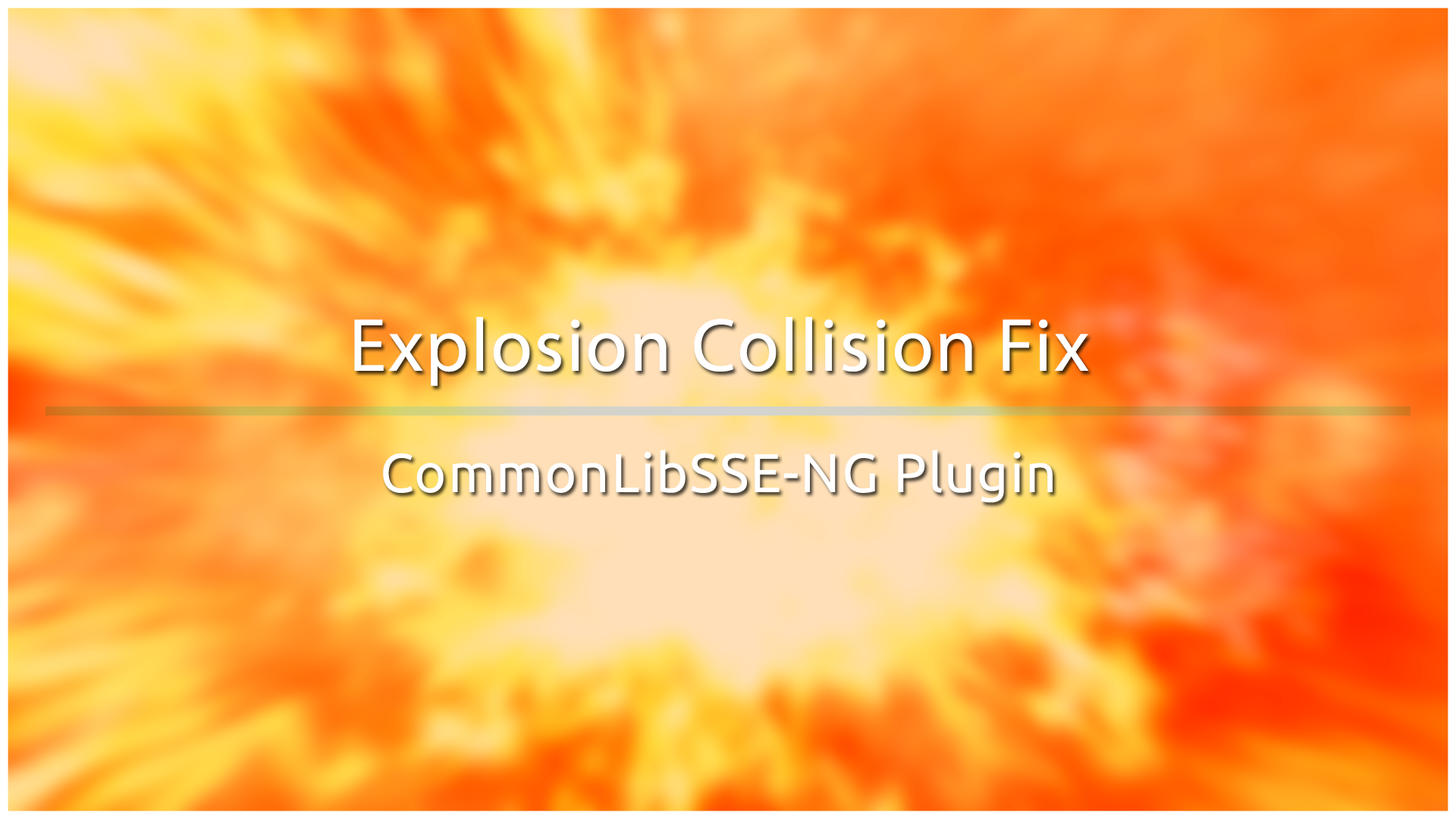
<style>
.page{position:relative;width:1456px;height:819px}
.page>*{position:absolute;margin:0}
.t1{font:75.8px "Ubuntu-Regular";letter-spacing:0.025em;color:#ffffff}
.t2{font:54.8px "Ubuntu-Regular";letter-spacing:0.025em;color:#ffffff}
</style>
<div class="page">
<p class="t1" style="left:354px;top:317px;width:735px;height:69px">Explosion Collision Fix</p>
<p class="t2" style="left:383px;top:450px;width:670px;height:53px">CommonLibSSE-NG Plugin</p>
</div>
